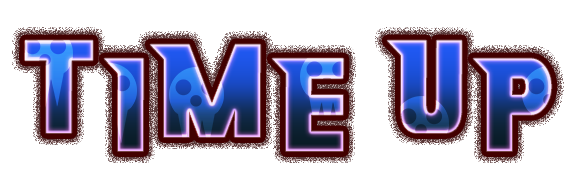
<style>
.page{position:relative;width:576px;height:192px;background:#ffffff}
.page>*{position:absolute;margin:0}
.t1{font:130px "NiseSonicBattle";letter-spacing:0.075em;text-transform:uppercase;scale:0.67 1}
.t2{font:130px "NiseSonicBattle";letter-spacing:0.2em;text-transform:uppercase;scale:0.67 1}
.t3{font:130px "NiseSonicBattle";letter-spacing:0.1em;text-transform:uppercase;scale:0.67 1}
</style>
<div class="page">
<p class="t1" style="left:25px;top:40px;width:527px;height:111px">T<span class="t2">i</span><span class="t3">m</span>e Up</p>
</div>
